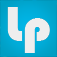
<style>
.page{position:relative;width:57px;height:57px;background:#eeeeee}
.page>*{position:absolute;margin:0}
.t1{font:51.5px "Bauhaus93";letter-spacing:-0.025em;color:#ffffff}
</style>
<div class="page">
<p class="t1" style="left:7px;top:7px;width:43px;height:46px">LP</p>
</div>
